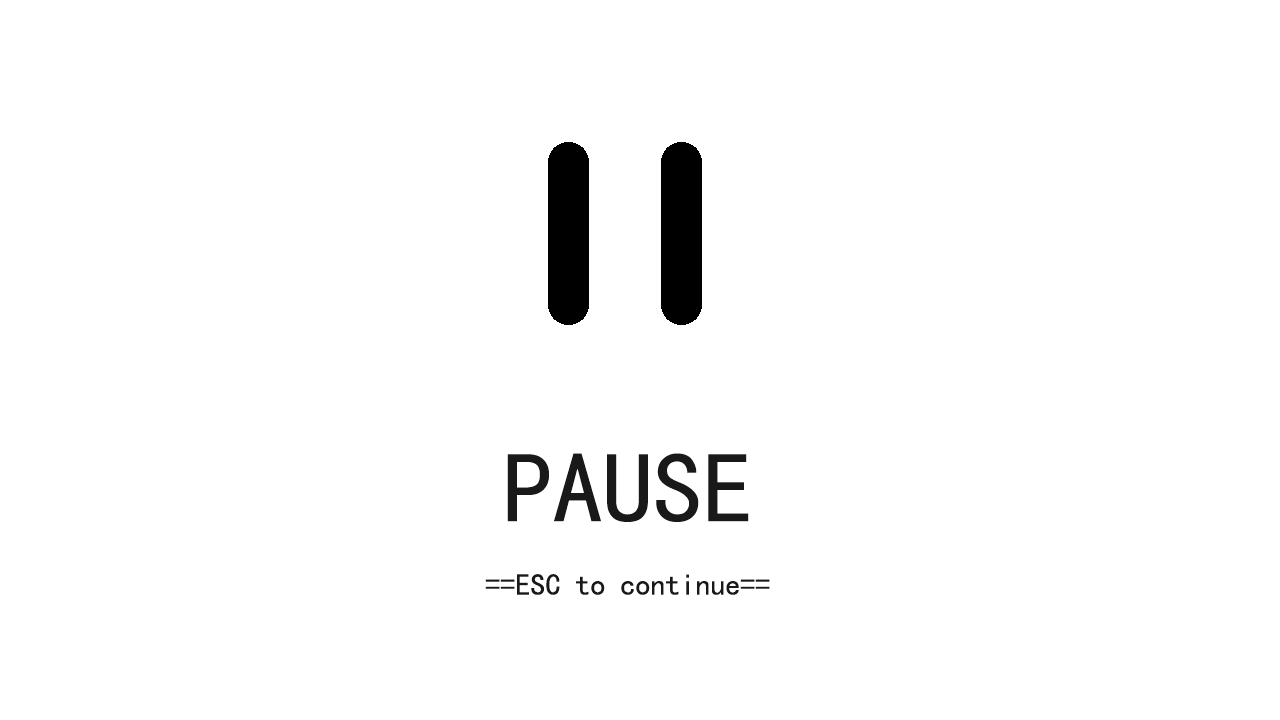
<style>
.page{position:relative;width:1280px;height:720px;background:#ffffff}
.page>*{position:absolute;margin:0}
.t1{font:30px "SimHei";color:#191919}
.t2{font:100px "SimHei";color:#191919}
</style>
<div class="page">
<p class="t1" style="left:485px;top:453px;width:285px;height:142px;text-align:center"><span class="t2">PAUSE<br></span><br>==ESC to continue==</p>
</div>
